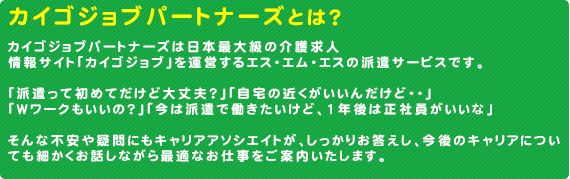
<style>
.page{position:relative;width:570px;height:179px;background:#0fa43c}
.page>*{position:absolute;margin:0}
.t1{font:22.1px "DFMaruGothic-SB-WING-RKSJ-H";letter-spacing:0.2em;color:#fffc00}
.t2{font:20px "DFMaruGothic-SB-WING-RKSJ-H";letter-spacing:0.2em;color:#fffc00}
.t3{font:13px "DFMaruGothic-SB-WING-RKSJ-H";letter-spacing:0.2em;color:#ffffff}
</style>
<div class="page">
<p class="t1" style="left:9px;top:5px;width:332px;height:21px">カイゴジョブパートナーズ<span class="t2">とは？</span></p>
<p class="t3" style="left:8px;top:40px;width:552px;height:122px">カイゴジョブパートナーズは日本最大級の介護求人<br>情報サイト「カイゴジョブ」を運営するエス・エム・エスの派遣サービスです。 <br><br>「派遣って初めてだけど大丈夫？」「自宅の近くがいいんだけど・・」 <br>「Wワークもいいの？」「今は派遣で働きたいけど、1年後は正社員がいいな」 <br><br>そんな不安や疑問にもキャリアアソシエイトが、しっかりお答えし、今後のキャリアについても細かくお話しながら最適なお仕事をご案内いたします。</p>
</div>
